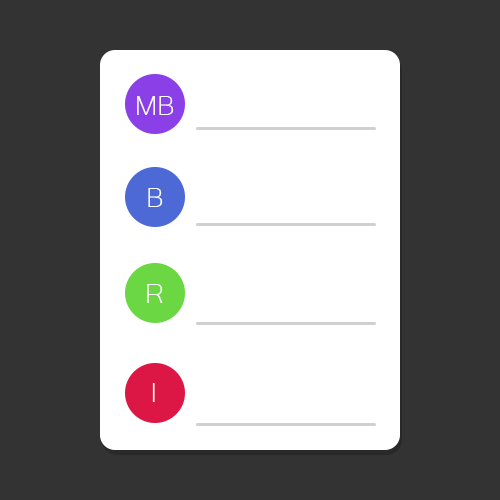
<style>
.page{position:relative;width:500px;height:500px;background:#333333}
.page>*{position:absolute;margin:0}
.t1{font:35px "Microsoft-Yi-Baiti";color:#ffffff}
</style>
<div class="page">
<p class="t1" style="left:137px;top:96px;width:37px;height:19px">MB</p>
<p class="t1" style="left:148px;top:188px;width:15px;height:19px">B</p>
<p class="t1" style="left:147px;top:284px;width:16px;height:19px">R</p>
<p class="t1" style="left:152px;top:383px;width:3px;height:19px">I</p>
</div>
